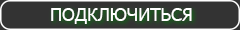
<style>
.page{position:relative;width:240px;height:30px;background:#333333}
.page>*{position:absolute;margin:0}
.t1{font:18px "Tahoma";letter-spacing:-0.005em;color:#ffffff}
</style>
<div class="page">
<p class="t1" style="left:51px;top:8px;width:141px;height:16px">ПОДКЛЮЧИТЬСЯ</p>
</div>
